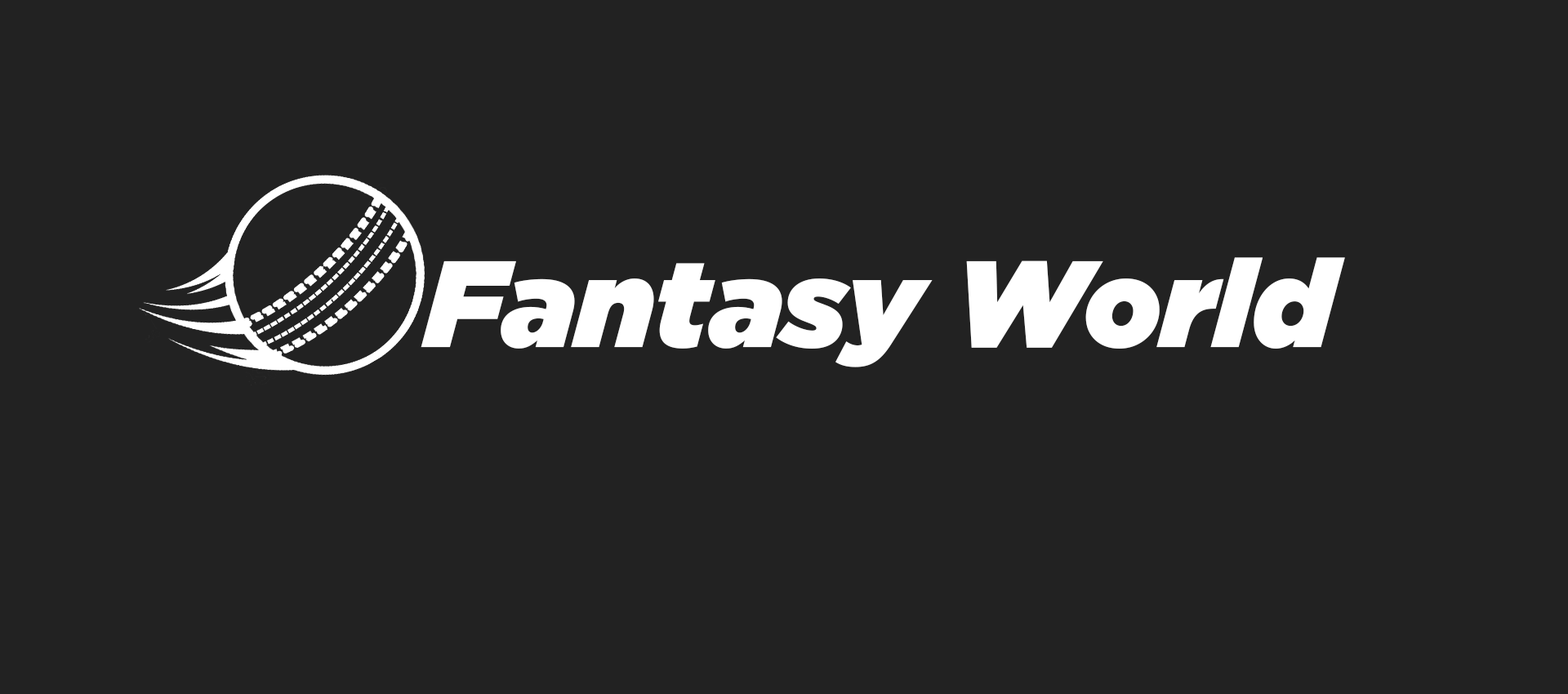
<style>
.page{position:relative;width:1568px;height:694px;background:#222222}
.page>*{position:absolute;margin:0}
.t1{font:122.5px "Gotham-UltraItalic";color:#ffffff}
</style>
<div class="page">
<p class="t1" style="left:421px;top:257px;width:924px;height:111px">Fantasy World</p>
</div>
